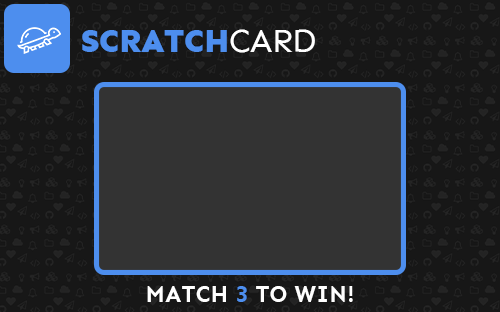
<style>
.page{position:relative;width:500px;height:312px;background:#171717}
.page>*{position:absolute;margin:0}
.t1{font:32.5px "Sen-ExtraBold";color:#4d8eee}
.t2{font:32.5px "Sen-Regular";color:#ffffff}
.t3{font:23.4px "Sen-Bold";color:#ffffff}
.t4{font:23.4px "Sen-Bold";color:#4d8eee}
</style>
<div class="page">
<p class="t1" style="left:82px;top:29px;width:233px;height:24px">SCRATCH<span class="t2">CARD</span></p>
<p class="t3" style="left:147px;top:286px;width:206px;height:16px">MATCH <span class="t4">3</span> TO WIN!</p>
</div>
